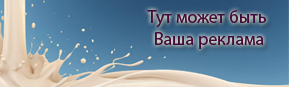
<style>
.page{position:relative;width:289px;height:87px}
.page>*{position:absolute;margin:0}
.t1{font:18px "MyriadPro-Regular";color:#430a3e}
</style>
<div class="page">
<p class="t1" style="left:147px;top:10px;width:119px;height:39px;text-align:center">Тут может быть <br>Ваша реклама</p>
</div>
